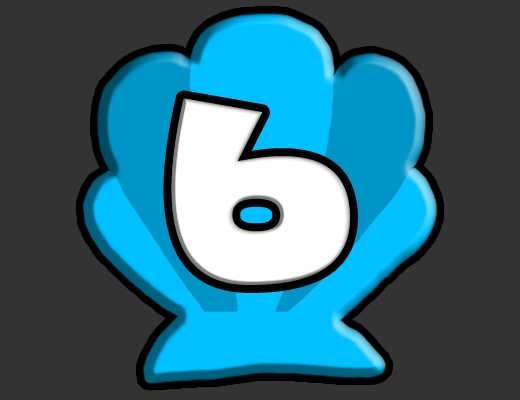
<style>
.page{position:relative;width:520px;height:400px;background:#333333}
.page>*{position:absolute;margin:0}
.t1{font:279.4px "Funhouse";color:#ffffff}
</style>
<div class="page">
<p class="t1" style="left:171px;top:98px;width:179px;height:187px">6</p>
</div>
